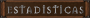
<style>
.page{position:relative;width:90px;height:18px}
.page>*{position:absolute;margin:0}
.t1{font:10px "Mason-Regular";letter-spacing:0.08em;color:#9a9a9a;scale:0.95 1}
</style>
<div class="page">
<p class="t1" style="left:7px;top:5px;width:77px;height:9px">ESTADISTICAS</p>
</div>
